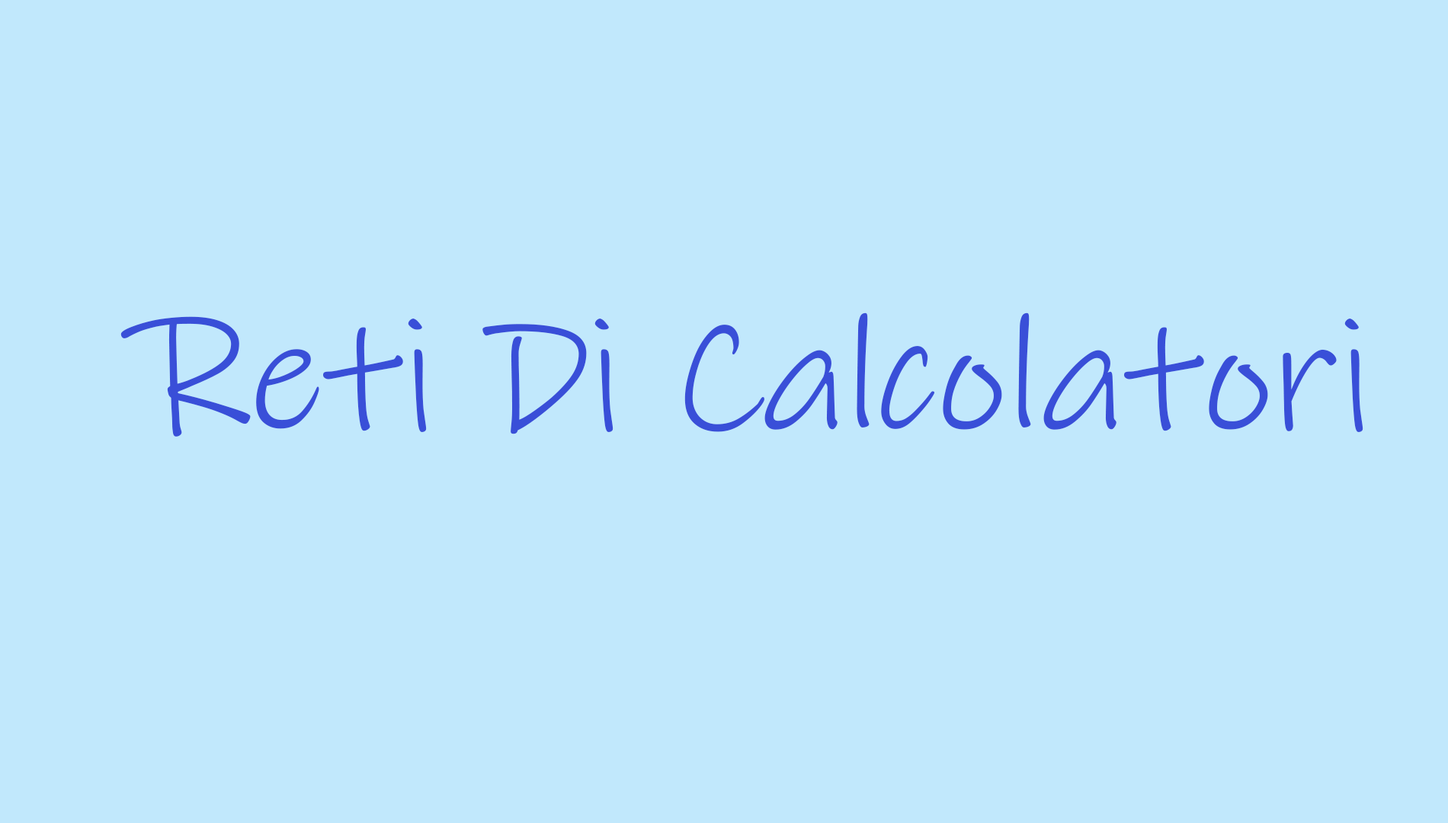
<style>
.page{position:relative;width:1448px;height:823px;background:#c1e8fc}
.page>*{position:absolute;margin:0}
.t1{font:161.4px "InkFree";color:#394fd8}
</style>
<div class="page">
<p class="t1" style="left:120px;top:313px;width:1244px;height:124px">Reti Di Calcolatori</p>
</div>
